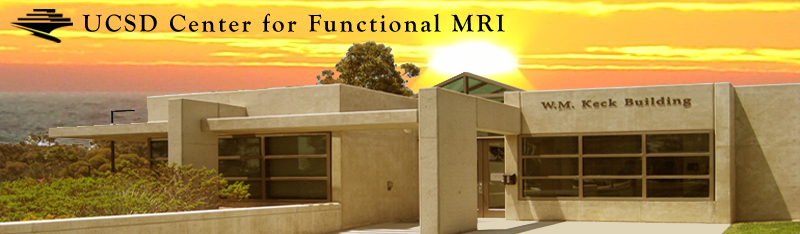
<style>
.page{position:relative;width:800px;height:234px}
.page>*{position:absolute;margin:0}
.t1{font:25px "GoudyOldStyleT-Bold";letter-spacing:0.1em;color:#000000}
</style>
<div class="page">
<p class="t1" style="left:82px;top:13px;width:423px;height:19px">UCSD Center for Functional MRI</p>
</div>
